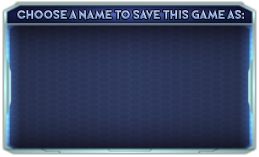
<style>
.page{position:relative;width:259px;height:157px}
.page>*{position:absolute;margin:0}
.t1{font:12.5px "PerfectlyTogether"}
</style>
<div class="page">
<p class="t1" style="left:16px;top:9px;width:228px;height:12px">Choose A name to save this game AS:</p>
</div>
